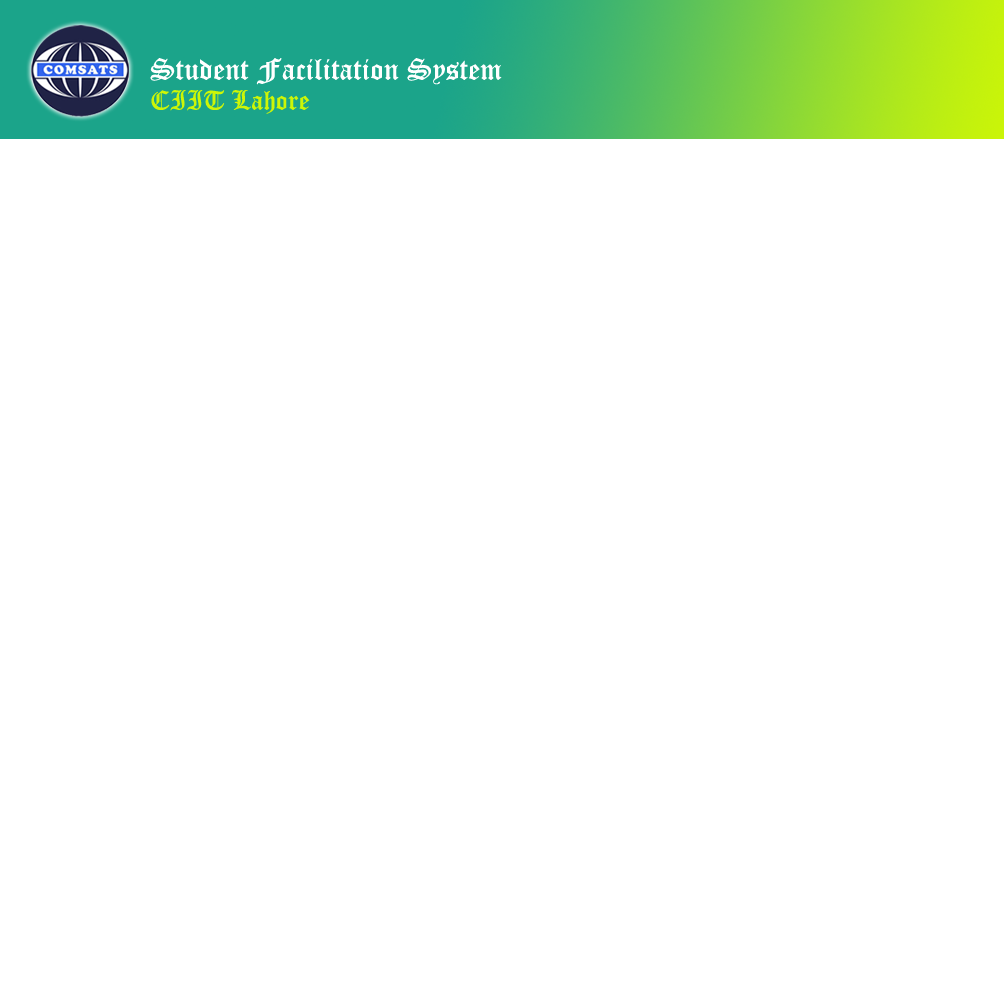
<style>
.page{position:relative;width:1004px;height:984px;background:#ffffff}
.page>*{position:absolute;margin:0}
.t1{font:30px "OldEnglishTextMT";letter-spacing:0.003em;color:#ffffff}
.t2{font:27px "OldEnglishTextMT";letter-spacing:0.003em;color:#cdf606}
</style>
<div class="page">
<p class="t1" style="left:150px;top:58px;width:352px;height:27px">Student Facilitation System</p>
<p class="t2" style="left:151px;top:90px;width:159px;height:24px">CIIT Lahore</p>
</div>
